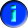
<style>
.page{position:relative;width:28px;height:28px;background:#003afe}
.page>*{position:absolute;margin:0}
.t1{font:19.7px "Verdana-Bold";font-weight:bold;scale:1.15 1}
</style>
<div class="page">
<p class="t1" style="left:11px;top:5px;width:5px;height:17px">i</p>
</div>
